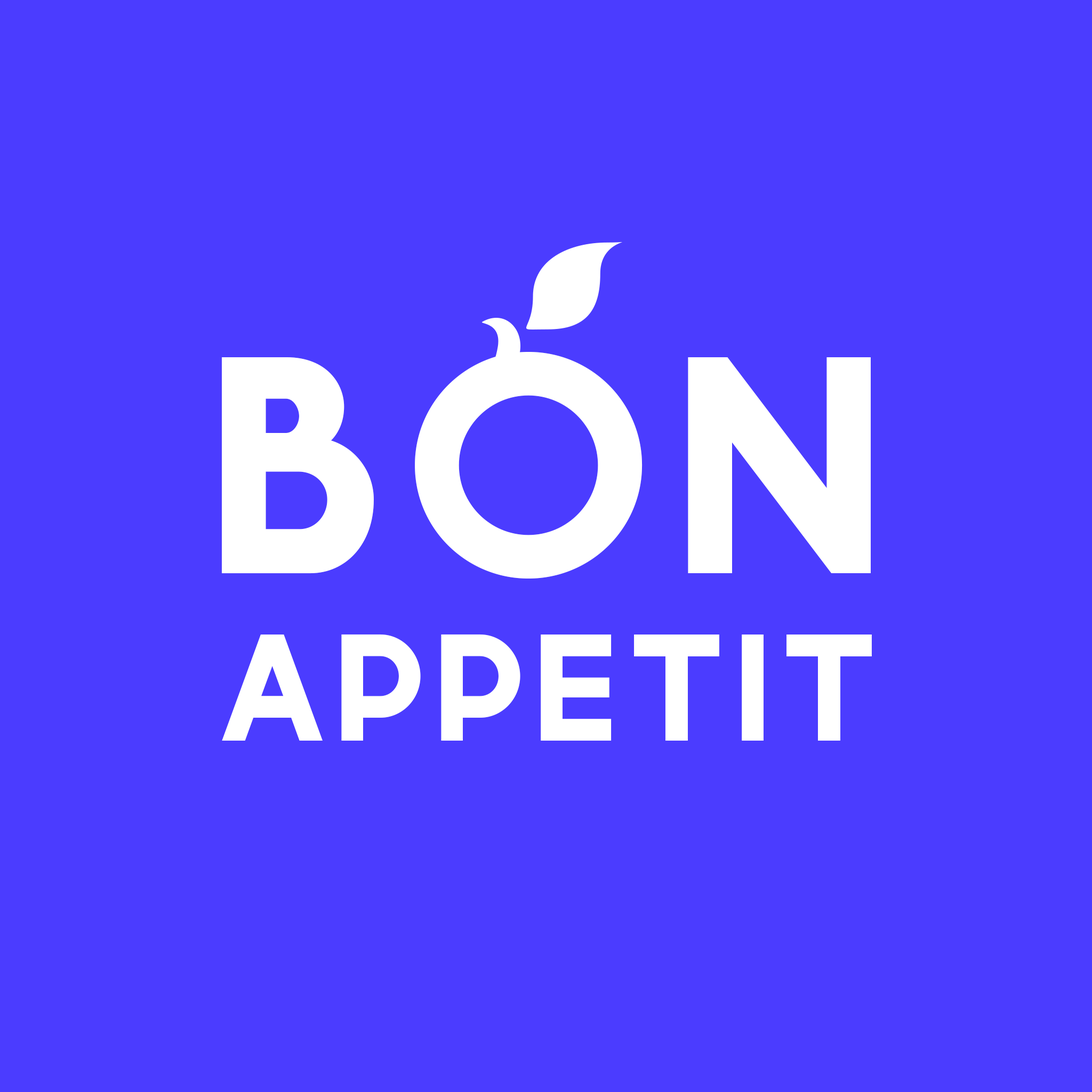
<style>
.page{position:relative;width:1092px;height:1092px;background:#4b3cff}
.page>*{position:absolute;margin:0}
.t1{font:416.4px "Momcake-Bold";letter-spacing:0.04em;color:#ffffff;text-transform:uppercase}
.t2{font:205.3px "Momcake-Bold";letter-spacing:0.032em;color:#ffffff;text-transform:uppercase}
</style>
<div class="page">
<p class="t1" style="left:222px;top:352px;width:649px;height:227px">bon</p>
<p class="t2" style="left:222px;top:634px;width:650px;height:107px">appetit</p>
</div>
